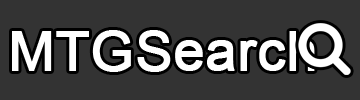
<style>
.page{position:relative;width:360px;height:100px;background:#333333}
.page>*{position:absolute;margin:0}
.t1{font:54.5px "ArialMT";color:#ffffff;font-weight:bold}
</style>
<div class="page">
<p class="t1" style="left:12px;top:30px;width:303px;height:42px">MTGSearch</p>
</div>
